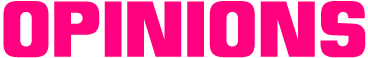
<style>
.page{position:relative;width:368px;height:58px;background:#ff007e}
.page>*{position:absolute;margin:0}
.t1{font:72px "NeographikMT";color:#ff007e}
</style>
<div class="page">
<p class="t1" style="left:3px;top:1px;width:363px;height:57px">OPINIONS</p>
</div>
